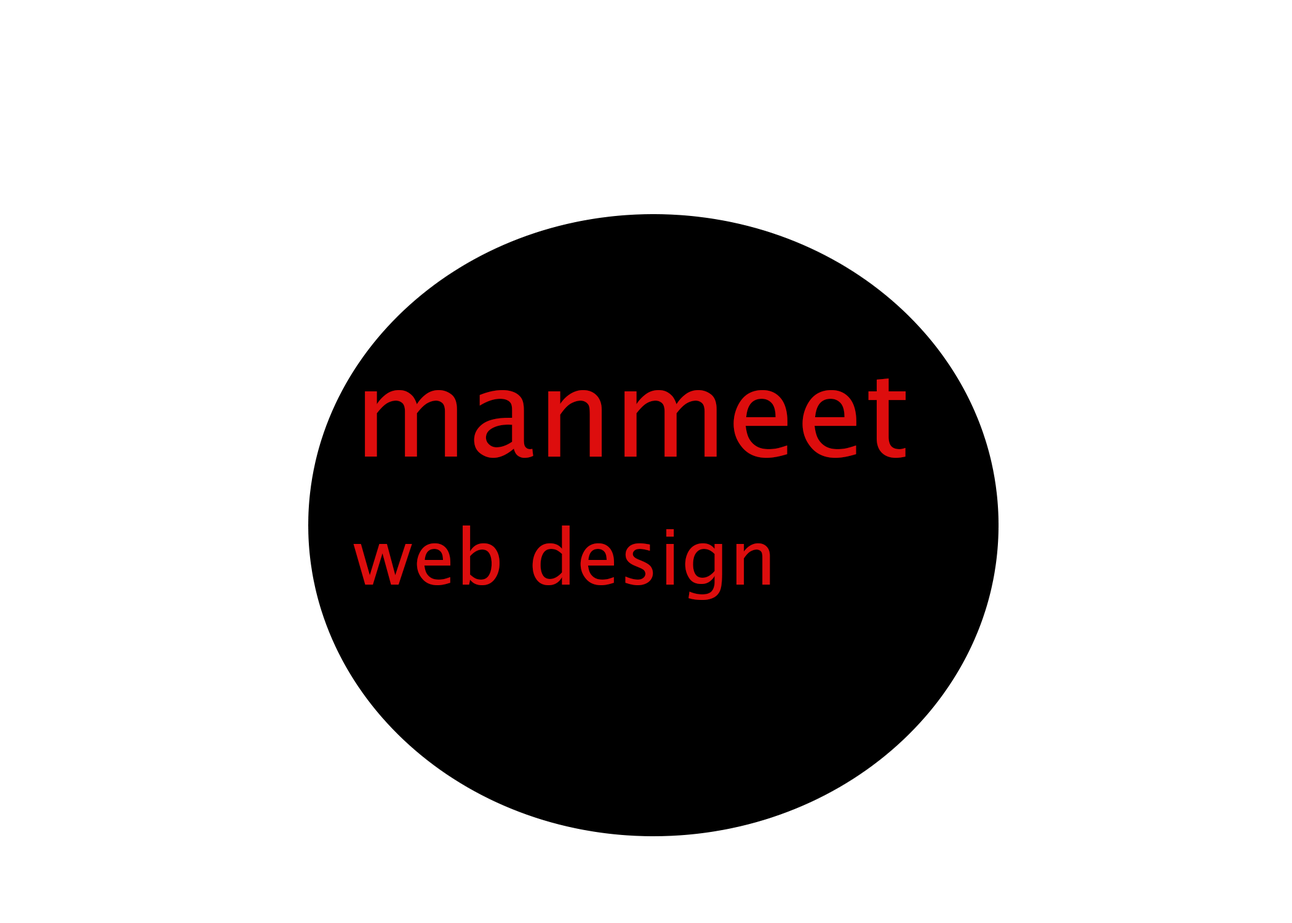
<style>
.page{position:relative;width:1292px;height:923px;background:#ffffff}
.page>*{position:absolute;margin:0}
.t1{font:123.1px "LucidaSans";color:#dd0d0d}
.t2{font:76.9px "LucidaSans";color:#dd0d0d}
</style>
<div class="page">
<p class="t1" style="left:365px;top:378px;width:541px;height:80px">manmeet</p>
<p class="t2" style="left:353px;top:525px;width:417px;height:75px">web design</p>
</div>
